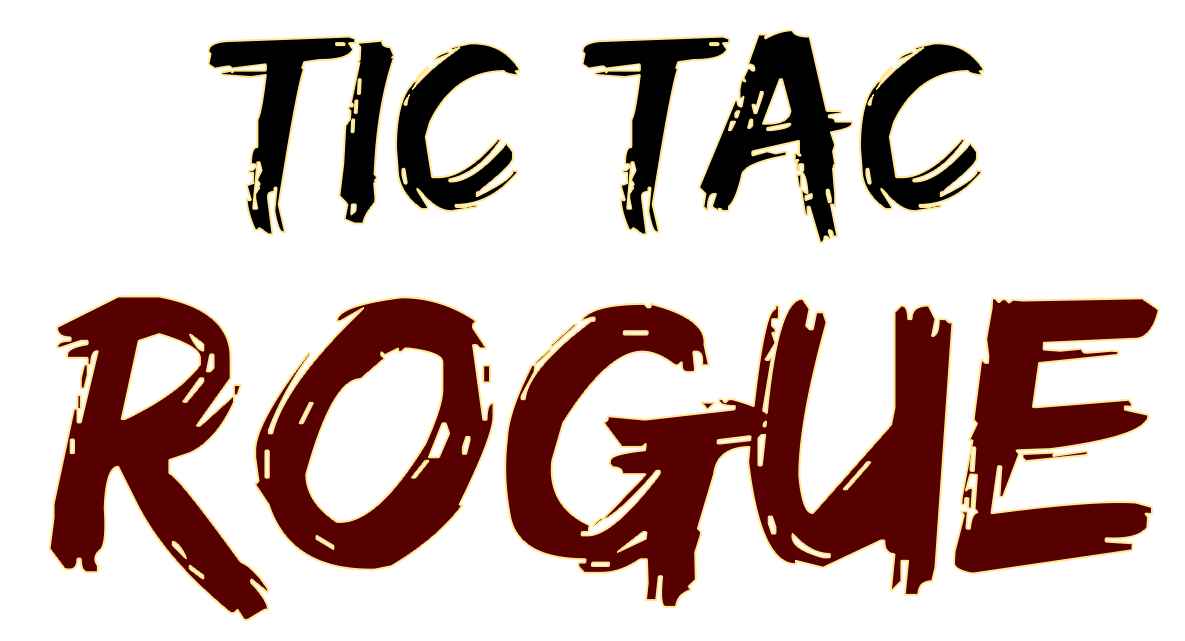
<style>
.page{position:relative;width:1185px;height:641px;background:#ffffff}
.page>*{position:absolute;margin:0}
.t1{font:256px/358.5px "Edo";color:#000000}
.t2{font:409.6px/358.5px "Edo";color:#560000}
</style>
<div class="page">
<p class="t1" style="left:49px;top:30px;width:1110px;height:590px;text-align:center">Tic TAC<br><span class="t2">ROGUE</span></p>
</div>
